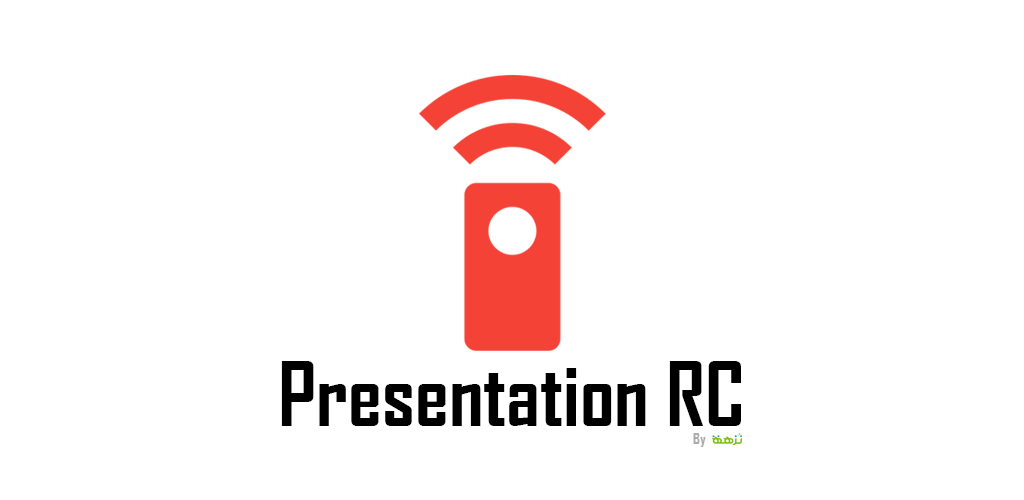
<style>
.page{position:relative;width:1024px;height:500px;background:#ffffff}
.page>*{position:absolute;margin:0}
.t1{font:85px "AgencyFB-Bold";color:#000000}
.t2{font:14.8px "AgencyFB-Bold";color:#aaaaaa}
</style>
<div class="page">
<p class="t1" style="left:281px;top:361px;width:460px;height:65px">Presentation RC</p>
<p class="t2" style="left:693px;top:433px;width:13px;height:14px">By</p>
</div>
